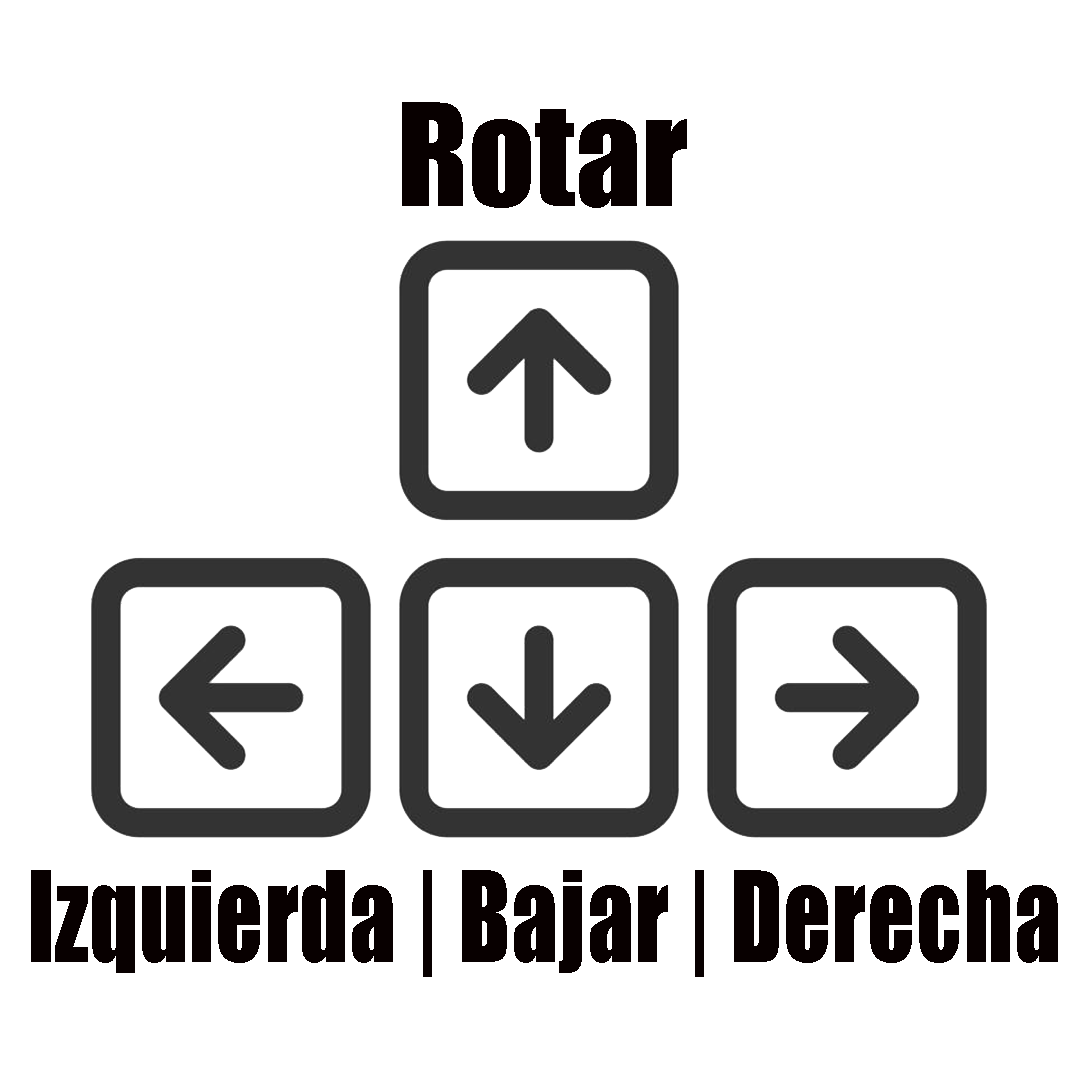
<style>
.page{position:relative;width:1080px;height:1080px;background:#ffffff}
.page>*{position:absolute;margin:0}
.t1{font:132.2px "Impact";color:#080000}
.t2{font:116.7px "Impact";color:#080000;scale:0.83 1}
</style>
<div class="page">
<p class="t1" style="left:402px;top:102px;width:285px;height:106px">Rotar</p>
<p class="t2" style="left:31px;top:870px;width:1027px;height:107px">Izquierda | Bajar | Derecha</p>
</div>
